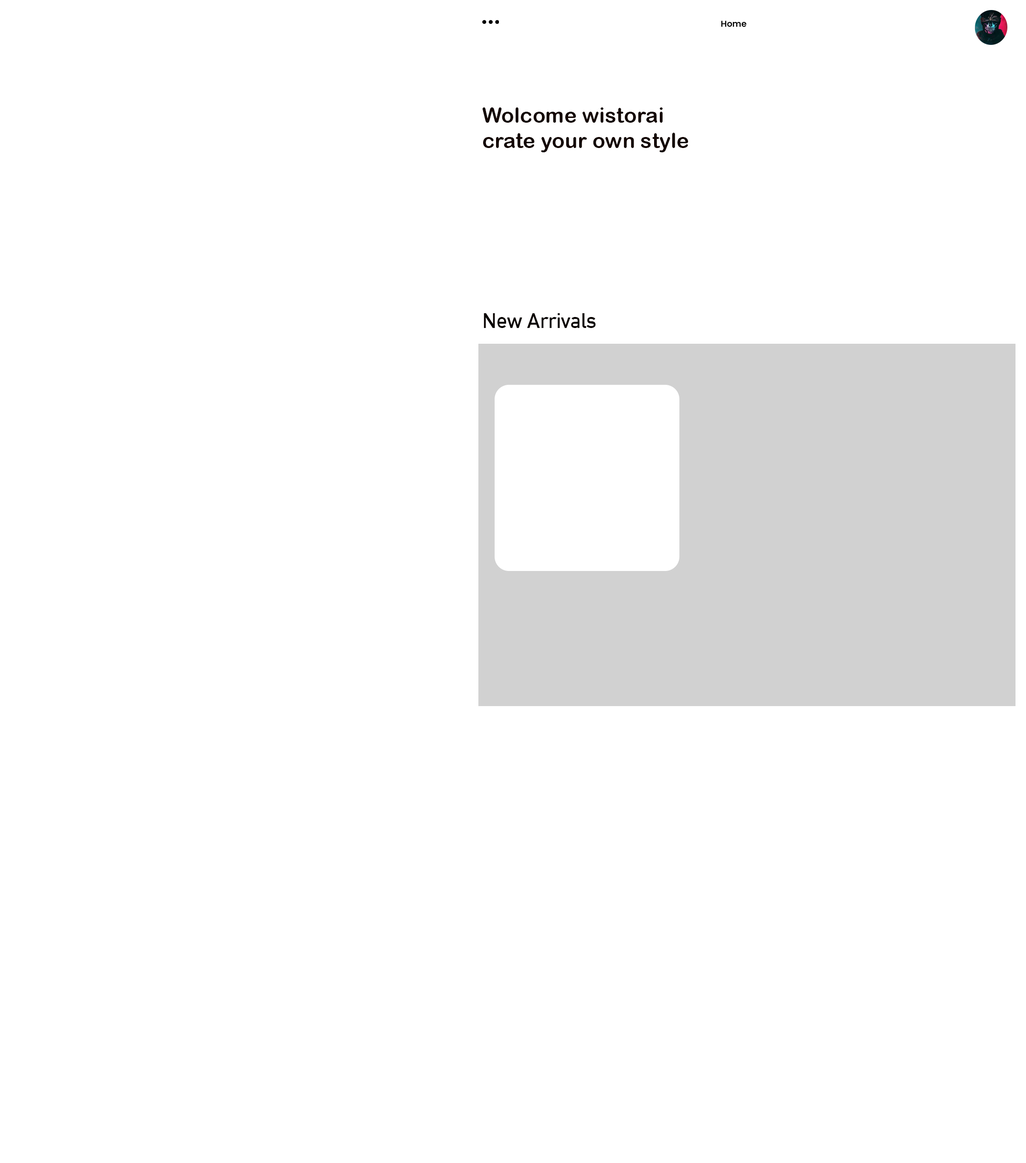
<style>
.page{position:relative;width:1026px;height:1163px;background:#ffffff}
.page>*{position:absolute;margin:0}
.t1{font:8.6px "Poppins-SemiBold";color:#000000}
.t2{font:21.2px "ArialRoundedMTBold";color:#140603}
.t3{font:21px "DINAlternate-Bold";color:#090301}
</style>
<div class="page">
<p class="t1" style="left:721px;top:21px;width:25px;height:6px">Home</p>
<p class="t2" style="left:482px;top:107px;width:206px;height:45px">Wolcome wistorai <br>crate your own style</p>
<p class="t3" style="left:483px;top:313px;width:113px;height:15px">New Arrivals</p>
</div>
